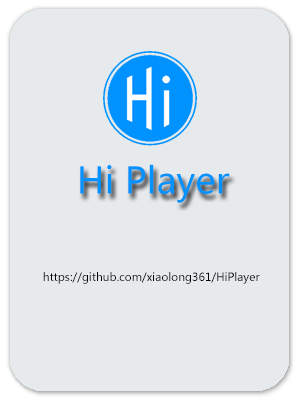
<style>
.page{position:relative;width:300px;height:400px;background:#e6eaed}
.page>*{position:absolute;margin:0}
.t1{font:36px "MicrosoftYaHei";color:#0092ff}
.t2{font:11px "MicrosoftYaHei";color:#000000}
</style>
<div class="page">
<p class="t1" style="left:80px;top:164px;width:150px;height:39px">Hi Player</p>
<p class="t2" style="left:43px;top:272px;width:217px;height:12px">https://github.com/xiaolong361/HiPlayer</p>
</div>
